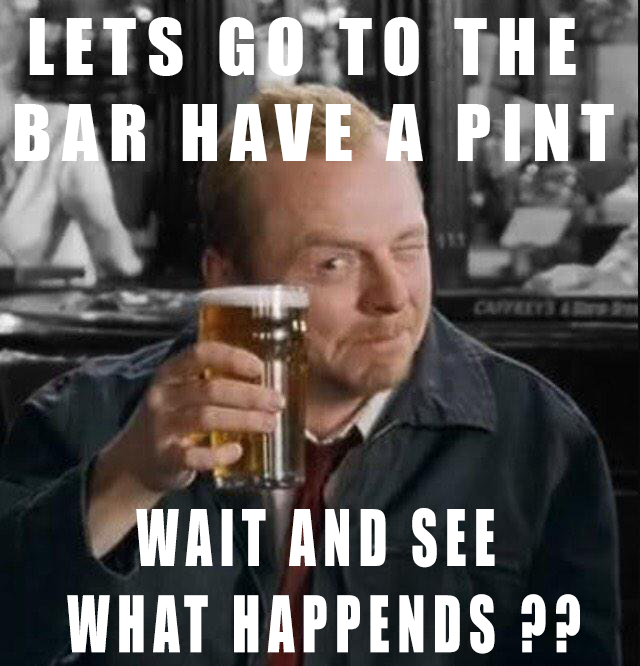
<style>
.page{position:relative;width:640px;height:666px}
.page>*{position:absolute;margin:0}
.t1{font:72px "Impact";letter-spacing:0.14em;color:#ffffff}
.t2{font:72px "Impact";letter-spacing:0.14em;color:#ffffff;scale:0.72 1}
</style>
<div class="page">
<p class="t1" style="left:14px;top:17px;width:600px;height:144px;text-align:center">LETS GO TO THE <br>BAR HAVE A PINT</p>
<p class="t2" style="left:67px;top:508px;width:513px;height:146px;text-align:center">WAIT AND SEE <br>WHAT HAPPENDS ??</p>
</div>
